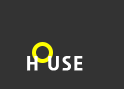
<style>
.page{position:relative;width:124px;height:89px;background:#333333}
.page>*{position:absolute;margin:0}
.t1{font:18px "NanumGothicExtraBold";letter-spacing:0.06em;color:#ffffff;font-weight:bold}
</style>
<div class="page">
<p class="t1" style="left:27px;top:56px;width:56px;height:15px">H USE</p>
</div>
